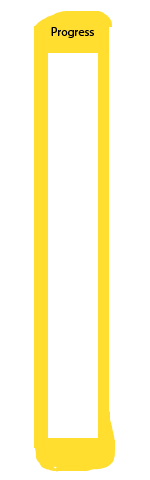
<style>
.page{position:relative;width:150px;height:480px;background:#ffffff}
.page>*{position:absolute;margin:0}
.t1{font:12px "MyriadPro-Regular";color:#000000}
</style>
<div class="page">
<p class="t1" style="left:51px;top:27px;width:43px;height:11px">Progress</p>
</div>
